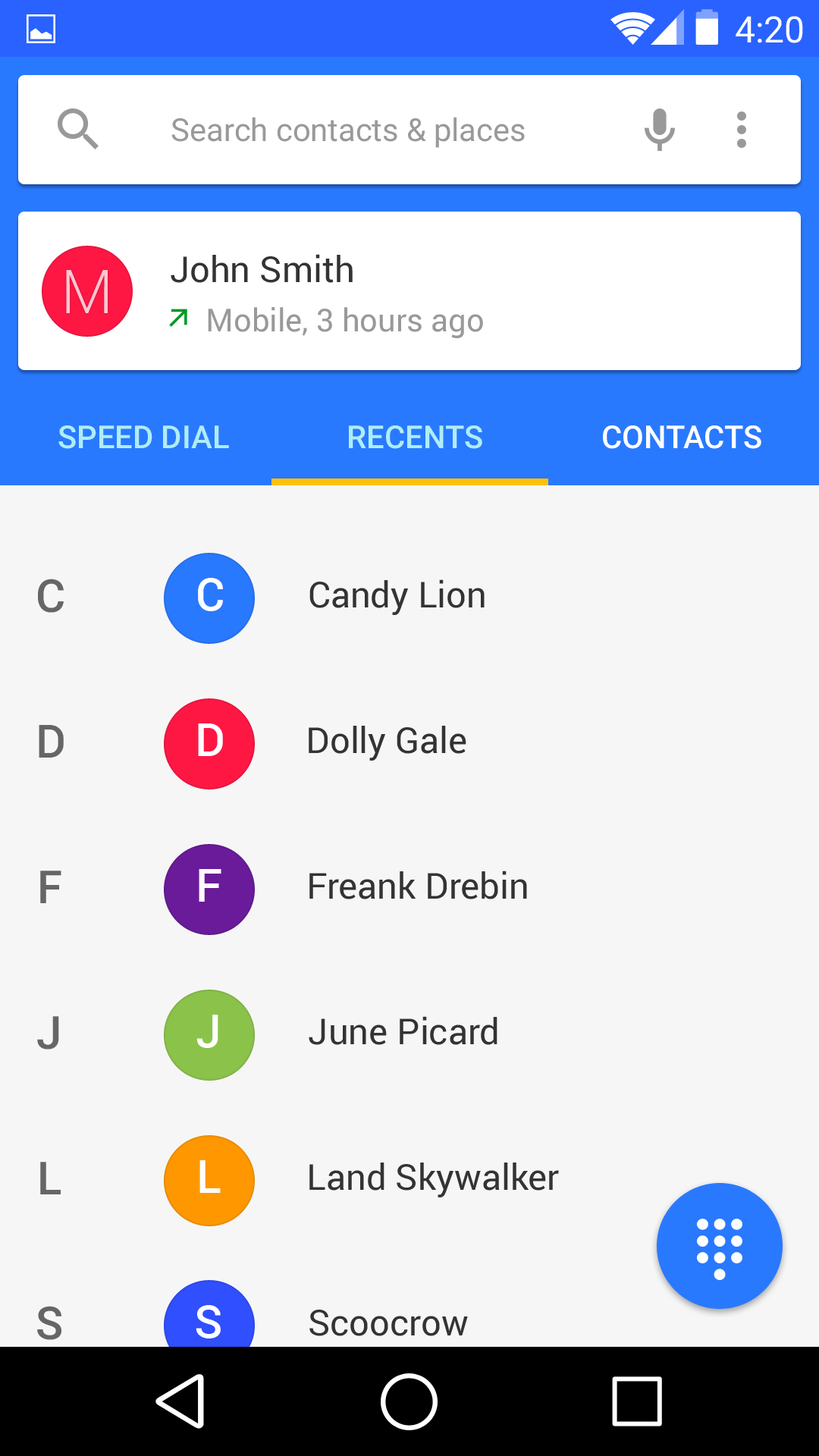
<style>
.page{position:relative;width:819px;height:1456px;background:#f6f6f6}
.page>*{position:absolute;margin:0}
.t1{font:36.4px "Roboto-Regular";color:#ffffff}
.t2{font:31.6px "Roboto-Regular";color:#999999}
.t3{font:35.9px "Roboto-Regular";color:#333333}
.t4{font:60.7px "Roboto-Light";color:#ffc5d0}
.t5{font:31.6px "Roboto-Medium";color:#b0ecf7}
.t6{font:31.6px "Roboto-Medium";color:#ffffff}
.t7{font:45.5px "Roboto-Medium";color:#666666}
.t8{font:45.5px "Roboto-Medium";color:#ffffff}
</style>
<div class="page">
<p class="t1" style="left:736px;top:16px;width:67px;height:27px">4:20</p>
<p class="t2" style="left:171px;top:117px;width:354px;height:31px">Search contacts &amp; places</p>
<p class="t3" style="left:171px;top:254px;width:182px;height:29px">John Smith</p>
<p class="t4" style="left:66px;top:270px;width:42px;height:43px">M</p>
<p class="t2" style="left:208px;top:307px;width:275px;height:31px">Mobile, 3 hours ago</p>
<p class="t5" style="left:58px;top:425px;width:171px;height:24px">SPEED DIAL</p>
<p class="t5" style="left:349px;top:425px;width:133px;height:24px">RECENTS</p>
<p class="t6" style="left:603px;top:425px;width:158px;height:24px">CONTACTS</p>
<p class="t7" style="left:38px;top:579px;width:26px;height:34px">C</p>
<p class="t8" style="left:198px;top:578px;width:25px;height:33px">C</p>
<p class="t3" style="left:309px;top:579px;width:176px;height:36px">Candy Lion</p>
<p class="t7" style="left:39px;top:725px;width:25px;height:33px">D</p>
<p class="t8" style="left:198px;top:723px;width:25px;height:33px">D</p>
<p class="t3" style="left:309px;top:726px;width:157px;height:35px">Dolly Gale</p>
<p class="t8" style="left:199px;top:869px;width:22px;height:33px">F</p>
<p class="t7" style="left:40px;top:871px;width:21px;height:32px">F</p>
<p class="t3" style="left:309px;top:871px;width:218px;height:28px">Freank Drebin</p>
<p class="t7" style="left:37px;top:1016px;width:22px;height:34px">J</p>
<p class="t8" style="left:196px;top:1015px;width:22px;height:33px">J</p>
<p class="t3" style="left:309px;top:1016px;width:188px;height:29px">June Picard</p>
<p class="t7" style="left:40px;top:1162px;width:21px;height:32px">L</p>
<p class="t8" style="left:199px;top:1160px;width:22px;height:33px">L</p>
<p class="t3" style="left:309px;top:1163px;width:250px;height:34px">Land Skywalker</p>
<p class="t7" style="left:37px;top:1306px;width:24px;height:34px">S</p>
<p class="t8" style="left:196px;top:1305px;width:25px;height:33px">S</p>
<p class="t3" style="left:309px;top:1310px;width:159px;height:26px">Scoocrow</p>
</div>
